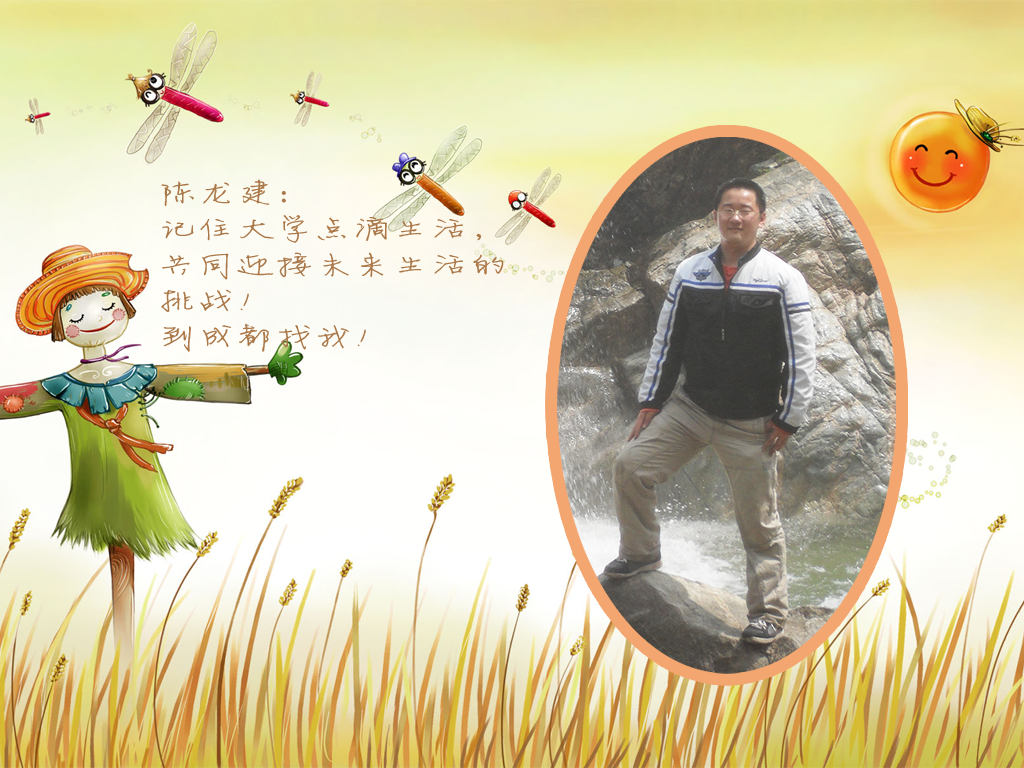
<style>
.page{position:relative;width:1024px;height:768px}
.page>*{position:absolute;margin:0}
.t1{font:30px/36px "FZJLJW--GB1-0";color:#ab7849;scale:1.3 1}
</style>
<div class="page">
<p class="t1" style="left:161px;top:179px;width:343px;height:173px">陈龙建：<br>记住大学点滴生活，<br>共同迎接未来生活的<br>挑战！<br>到成都找我！</p>
</div>
